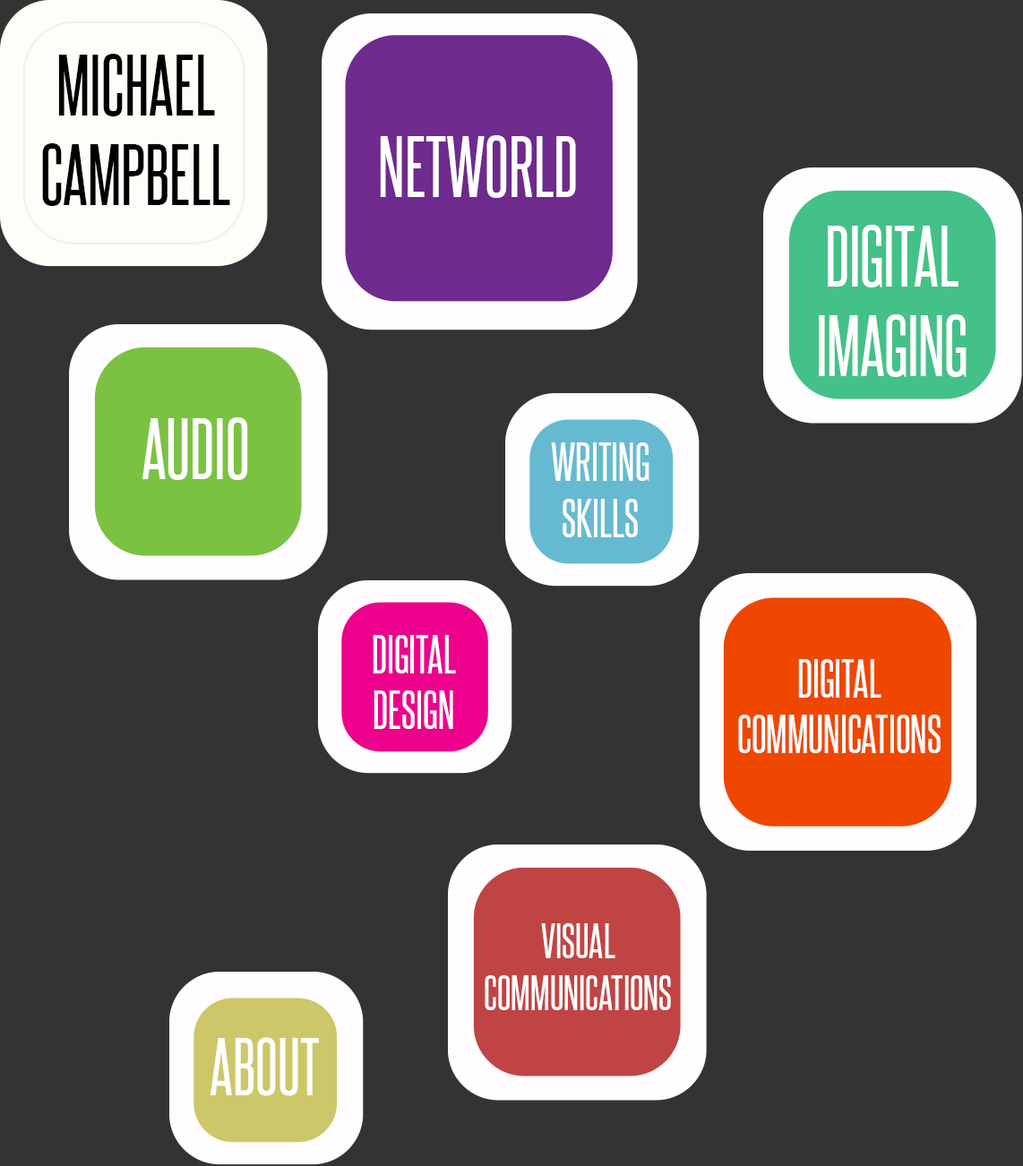
<style>
.page{position:relative;width:1023px;height:1166px;background:#333333}
.page>*{position:absolute;margin:0}
.t1{font:74.6px "SteelfishRg-Regular";color:#000000}
.t2{font:74.6px "SteelfishRg-Regular";color:#ffffff}
.t3{font:74.6px "SteelfishRg-Regular";letter-spacing:-0.009em;color:#ffffff}
.t4{font:74.6px "SteelfishRg-Regular";letter-spacing:-0.009em;color:#000000}
.t5{font:46.6px "SteelfishRg-Regular";color:#ffffff}
.t6{font:46.6px "SteelfishRg-Regular";letter-spacing:-0.034em;color:#ffffff}
.t7{font:46.6px "SteelfishRg-Regular";letter-spacing:-0.009em;color:#ffffff}
.t8{font:42.9px "SteelfishRg-Regular";color:#ffffff}
.t9{font:42.9px "SteelfishRg-Regular";letter-spacing:-0.009em;color:#ffffff}
.t10{font:42.9px "SteelfishRg-Regular";letter-spacing:-0.034em;color:#ffffff}
.t11{font:69px "SteelfishRg-Regular";color:#ffffff}
</style>
<div class="page">
<p class="t1" style="left:58px;top:54px;width:157px;height:62px">MICHAEL</p>
<p class="t2" style="left:380px;top:135px;width:196px;height:63px">NET<span class="t3">W</span>ORLD</p>
<p class="t1" style="left:42px;top:143px;width:188px;height:63px"><span class="t4">C</span>AMPBELL</p>
<p class="t3" style="left:819px;top:225px;width:147px;height:152px;text-align:center">DIGITAL<br>IMAGING</p>
<p class="t2" style="left:142px;top:417px;width:106px;height:63px"><span class="t3">A</span>UDIO</p>
<p class="t5" style="left:551px;top:442px;width:98px;height:39px">WRITING</p>
<p class="t5" style="left:562px;top:499px;width:76px;height:38px">SKILLS</p>
<p class="t5" style="left:373px;top:635px;width:83px;height:38px">DIGI<span class="t6">T</span>AL</p>
<p class="t5" style="left:798px;top:659px;width:83px;height:39px">DIGI<span class="t6">T</span>AL</p>
<p class="t5" style="left:373px;top:690px;width:80px;height:39px">DESIGN</p>
<p class="t5" style="left:738px;top:715px;width:202px;height:38px">COMMUNI<span class="t7">C</span><span class="t6">A</span>TIONS</p>
<p class="t8" style="left:541px;top:923px;width:74px;height:35px">VIS<span class="t9">U</span>AL</p>
<p class="t8" style="left:484px;top:975px;width:187px;height:35px">COMMUNI<span class="t9">C</span><span class="t10">A</span>TIONS</p>
<p class="t11" style="left:210px;top:1037px;width:109px;height:59px">ABOUT</p>
</div>
